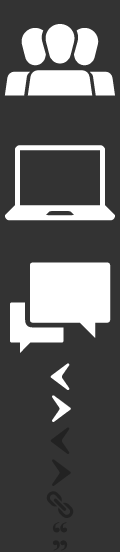
<style>
.page{position:relative;width:120px;height:552px;background:#333333}
.page>*{position:absolute;margin:0}
.t1{font:120px/120px "Sosa-Regular";color:#ffffff}
.t2{font:32px/16px "Sosa-Regular";color:#ffffff}
.t3{font:32px/16px "Sosa-Regular";color:#222222}
.t4{font:32px "Sosa-Regular";color:#222222}
.t5{font:16px "Sosa-Regular";color:#222222}
</style>
<div class="page">
<p class="t1" style="left:4px;top:24px;width:111px;height:329px;text-align:center">Ý<br>7<br>h</p>
<p class="t2" style="left:50px;top:363px;width:21px;height:59px;text-align:center">‹<br><br>›</p>
<p class="t3" style="left:50px;top:427px;width:21px;height:59px;text-align:center">‹<br><br>›</p>
<p class="t4" style="left:46px;top:491px;width:28px;height:27px">ä</p>
<p class="t5" style="left:52px;top:522px;width:16px;height:11px">B</p>
<p class="t5" style="left:52px;top:540px;width:16px;height:11px">C</p>
</div>
